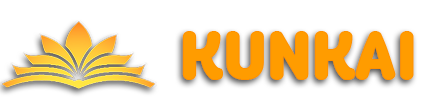
<style>
.page{position:relative;width:421px;height:110px;background:#ffffff}
.page>*{position:absolute;margin:0}
.t1{font:95.9px "FCHomeBlack";color:#ff9c00;scale:0.85 1}
</style>
<div class="page">
<p class="t1" style="left:182px;top:31px;width:232px;height:49px">KUNKAI</p>
</div>
